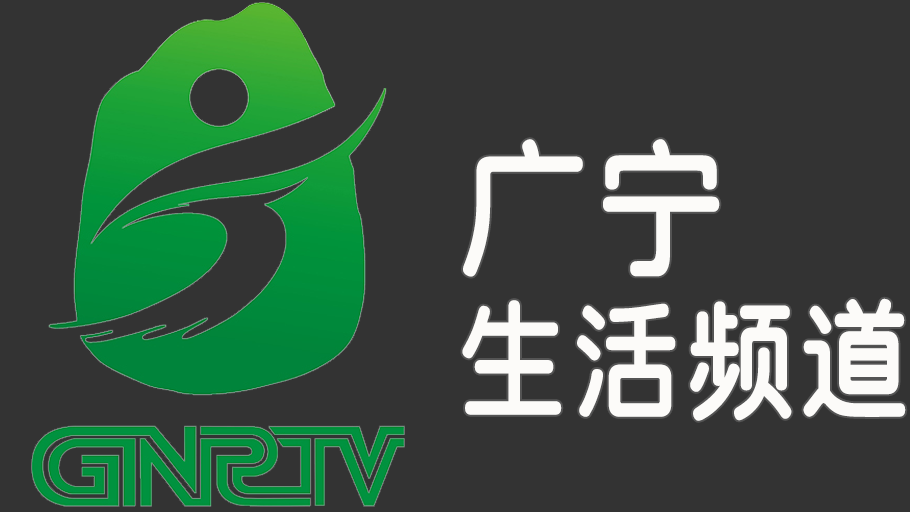
<style>
.page{position:relative;width:910px;height:512px;background:#333333}
.page>*{position:absolute;margin:0}
.t1{font:132px/160px "SJyuantijian-C-Regular";letter-spacing:0.02em;color:#fcfbf9;scale:0.85 1}
.t2{font:150px/160px "SJyuantijian-C-Regular";letter-spacing:0.02em;color:#fcfbf9;scale:0.9 1}
</style>
<div class="page">
<p class="t1" style="left:462px;top:139px;width:444px;height:282px"><span class="t2">广宁<br></span>生活频道</p>
</div>
